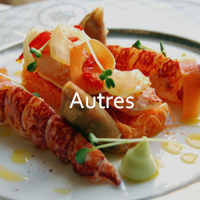
<style>
.page{position:relative;width:200px;height:200px}
.page>*{position:absolute;margin:0}
.t1{font:24px "Corbel";color:#ffffff}
</style>
<div class="page">
<p class="t1" style="left:69px;top:92px;width:65px;height:17px">Autres</p>
</div>
